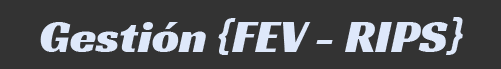
<style>
.page{position:relative;width:501px;height:69px;background:#333333}
.page>*{position:absolute;margin:0}
.t1{font:48px "RacingSansOne-Regular";color:#dee8fa}
</style>
<div class="page">
<p class="t1" style="left:40px;top:17px;width:423px;height:38px">Gestión {FEV - RIPS}</p>
</div>
